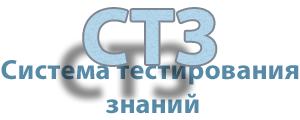
<style>
.page{position:relative;width:300px;height:120px;background:#ffffff}
.page>*{position:absolute;margin:0}
.t1{font:28px "MyriadPro-Bold";color:#578aa7}
</style>
<div class="page">
<p class="t1" style="left:1px;top:60px;width:298px;height:54px;text-align:center">Система тестирования <br>знаний</p>
</div>
